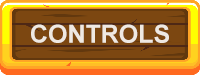
<style>
.page{position:relative;width:200px;height:75px;background:#7c4711}
.page>*{position:absolute;margin:0}
.t1{font:25px "Arial-BoldMT";color:#f0f0f0}
</style>
<div class="page">
<p class="t1" style="left:31px;top:24px;width:138px;height:19px">CONTROLS</p>
</div>
